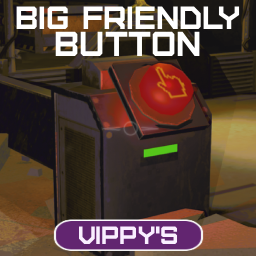
<style>
.page{position:relative;width:256px;height:256px}
.page>*{position:absolute;margin:0}
.t1{font:32px "Furore";color:#ffffff}
.t2{font:34.5px "Furore";color:#ffffff}
</style>
<div class="page">
<p class="t1" style="left:16px;top:6px;width:224px;height:23px">Big friendly</p>
<p class="t2" style="left:55px;top:31px;width:145px;height:25px">button</p>
</div>
